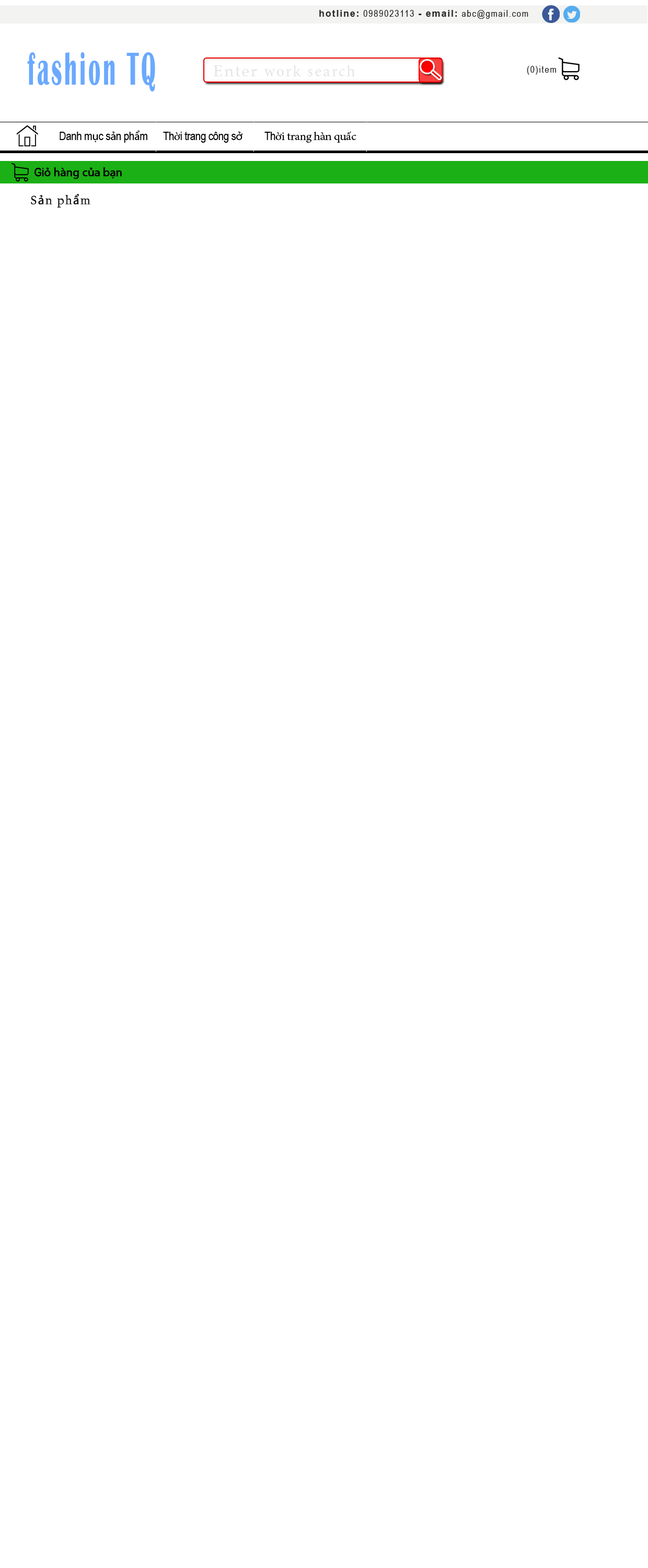
<style>
.page{position:relative;width:648px;height:1568px;background:#ffffff}
.page>*{position:absolute;margin:0}
.t1{font:9.4px "ArialNarrow";letter-spacing:0.1em;color:#282727}
.t2{font:9.4px "Arial-BoldMT";letter-spacing:0.1em;color:#282727}
.t3{font:47.6px "BritannicBold";letter-spacing:0.1em;color:#6ba9fe;scale:0.48 1}
.t4{font:15.7px "MinionPro-Regular";letter-spacing:0.1em;color:#e5e4e4}
.t5{font:15.7px "BookAntiqua";letter-spacing:0.1em;color:#e5e4e4}
.t6{font:11.9px "ArialNarrow";letter-spacing:-0.02em;color:#000000}
.t7{font:11.9px "MyriadPro-Regular";letter-spacing:-0.02em;color:#000000}
.t8{font:11.9px "MinionPro-Regular";letter-spacing:-0.02em;color:#000000}
.t9{font:11.9px "MyriadPro-Regular";letter-spacing:-0.02em;color:#030303;font-weight:bold}
.t10{font:11.9px "ArialNarrow";letter-spacing:-0.02em;color:#030303;font-weight:bold}
.t11{font:12.5px "CalifornianFB-Reg";letter-spacing:0.1em;color:#000000}
.t12{font:12.5px "MyriadPro-Regular";letter-spacing:0.1em;color:#000000}
</style>
<div class="page">
<p class="t1" style="left:319px;top:10px;width:209px;height:9px"><span class="t2">hotline:</span> 0989023113 <span class="t2">- email:</span> abc@gmail.com</p>
<p class="t3" style="left:27px;top:52px;width:128px;height:39px">fashion TQ</p>
<p class="t4" style="left:213px;top:65px;width:142px;height:11px"><span class="t5">Enter </span>work search</p>
<p class="t1" style="left:527px;top:66px;width:29px;height:9px">(0)item</p>
<p class="t6" style="left:60px;top:130px;width:87px;height:13px">Danh m<span class="t7">ụ</span>c s<span class="t7">ả</span>n ph<span class="t7">ẩ</span>m</p>
<p class="t6" style="left:163px;top:131px;width:80px;height:12px">Th<span class="t8">ờ</span>i trang công s<span class="t7">ở</span></p>
<p class="t8" style="left:264px;top:131px;width:92px;height:12px"><span class="t6">Th</span>ời trang hàn quấc</p>
<p class="t9" style="left:34px;top:167px;width:88px;height:12px"><span class="t10">Gi</span>ỏ hàng của bạn</p>
<p class="t11" style="left:31px;top:194px;width:59px;height:13px">S<span class="t12">ả</span>n ph<span class="t12">ẩ</span>m</p>
</div>
